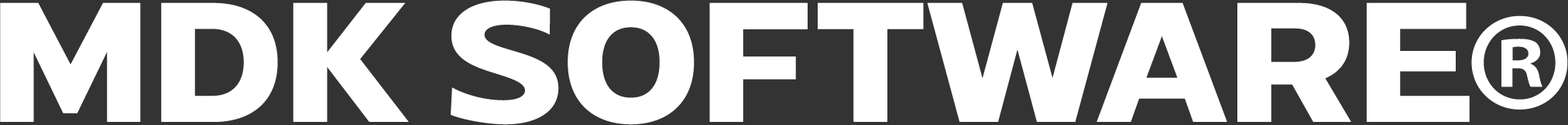
<style>
.page{position:relative;width:1568px;height:125px;background:#ffffff}
.page>*{position:absolute;margin:0}
.t1{font:170.4px "FONTSPRINGDEMO-RadiateSansBold";color:#ffffff}
.t2{font:283.9px "MyriadPro-Regular";color:#ffffff}
</style>
<div class="page">
<p class="t1" style="left:0px;top:0px;width:1470px;height:125px">MDK SOFTWARE</p>
<p class="t2" style="left:1471px;top:15px;width:97px;height:95px">®</p>
</div>
